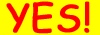
<style>
.page{position:relative;width:100px;height:35px;background:#ffff00}
.page>*{position:absolute;margin:0}
.t1{font:37.5px "ComicSansMS";color:#ff0000;text-transform:uppercase;font-weight:bold}
</style>
<div class="page">
<p class="t1" style="left:6px;top:1px;width:84px;height:33px">YES!</p>
</div>
